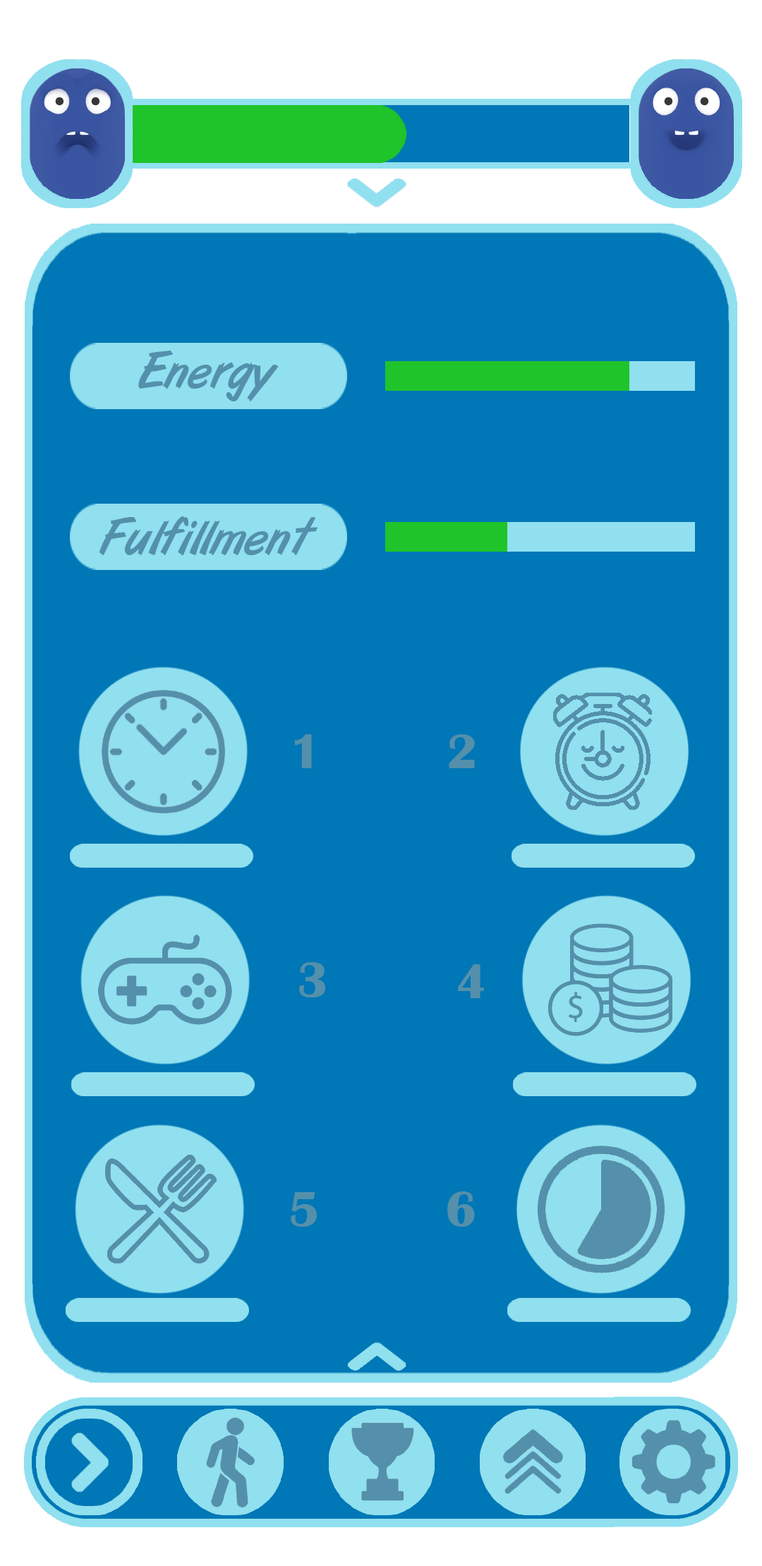
<style>
.page{position:relative;width:762px;height:1566px;background:#0077b6}
.page>*{position:absolute;margin:0}
.t1{font:50.8px "ArtBrush";color:#5490ab}
.t2{font:50.8px "BritannicBold";color:#5490ab}
</style>
<div class="page">
<p class="t1" style="left:138px;top:350px;width:141px;height:51px">Energy</p>
<p class="t1" style="left:99px;top:516px;width:218px;height:39px">Fulfillment</p>
<p class="t2" style="left:294px;top:734px;width:18px;height:34px">1</p>
<p class="t2" style="left:449px;top:734px;width:26px;height:34px">2</p>
<p class="t2" style="left:299px;top:962px;width:26px;height:35px">3</p>
<p class="t2" style="left:458px;top:964px;width:26px;height:34px">4</p>
<p class="t2" style="left:291px;top:1192px;width:26px;height:34px">5</p>
<p class="t2" style="left:447px;top:1191px;width:28px;height:35px">6</p>
</div>
